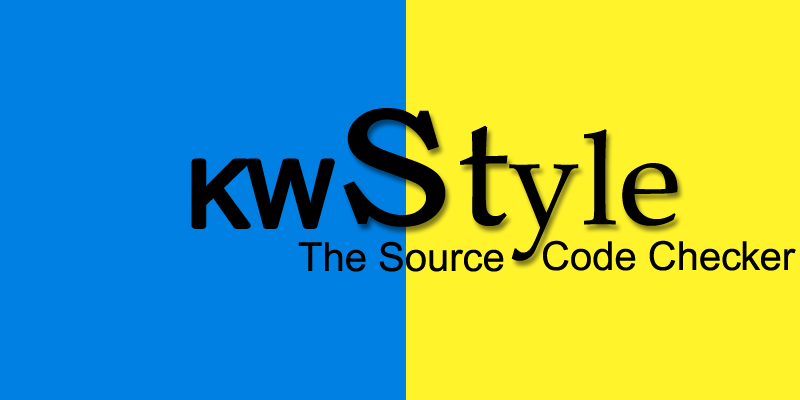
<style>
.page{position:relative;width:800px;height:400px;background:#0080e2}
.page>*{position:absolute;margin:0}
.t1{font:130px "BookAntiqua";color:#000000}
.t2{font:240px "BookmanOldStyle";color:#000000}
.t3{font:159px "BookAntiqua";color:#000000}
.t4{font:90px "ArialMT";color:#000000}
.t5{font:40px "ArialMT";color:#000000}
</style>
<div class="page">
<p class="t1" style="left:343px;top:108px;width:335px;height:153px"><span class="t2">s</span><span class="t3">t</span>yle</p>
<p class="t4" style="left:194px;top:161px;width:138px;height:65px">KW</p>
<p class="t5" style="left:298px;top:241px;width:206px;height:31px">The Source</p>
<p class="t5" style="left:543px;top:240px;width:253px;height:31px">Code Checker</p>
</div>
